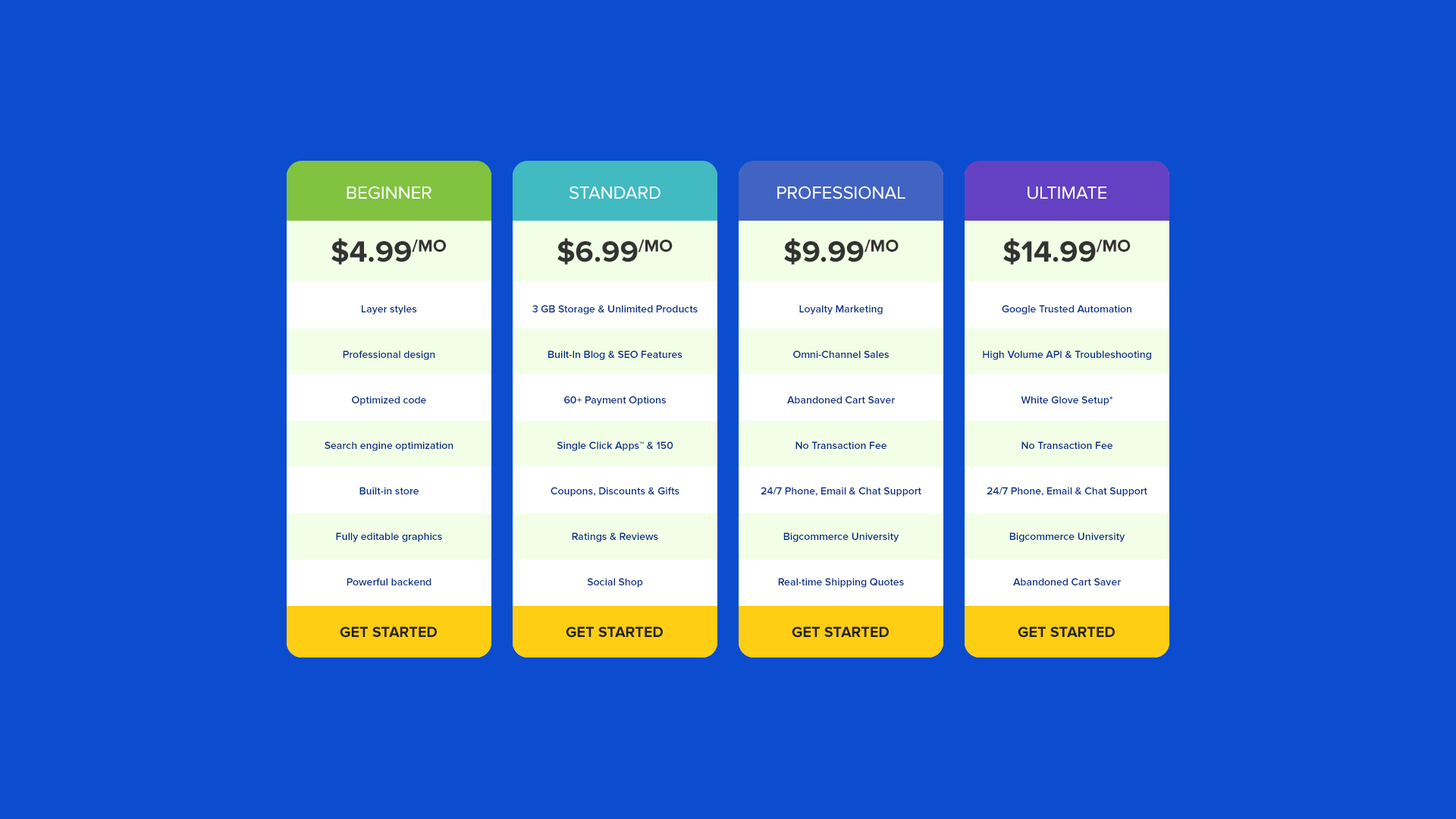
<style>
.page{position:relative;width:1456px;height:819px;background:#0c4cce}
.page>*{position:absolute;margin:0}
.t1{font:18.2px "ProximaNova-Regular";color:#ffffff;text-transform:uppercase}
.t2{font:30.3px "ProximaNova-Bold";color:#333333;text-transform:uppercase}
.t3{font:10.6px/45.5px "ProximaNova-Semibold";color:#032f87}
.t4{font:15.2px "ProximaNova-Bold";color:#222222;text-transform:uppercase}
</style>
<div class="page">
<p class="t1" style="left:347px;top:186px;width:84px;height:13px">Beginner</p>
<p class="t1" style="left:570px;top:186px;width:90px;height:13px">Standard</p>
<p class="t1" style="left:777px;top:186px;width:128px;height:13px">professional</p>
<p class="t1" style="left:1028px;top:187px;width:78px;height:12px">ultimate</p>
<p class="t2" style="left:331px;top:238px;width:115px;height:27px">$4.99/mo</p>
<p class="t2" style="left:557px;top:238px;width:116px;height:27px">$6.99/mo</p>
<p class="t2" style="left:784px;top:238px;width:115px;height:27px">$9.99/mo</p>
<p class="t2" style="left:1003px;top:238px;width:128px;height:27px">$14.99/mo</p>
<p class="t3" style="left:325px;top:305px;width:128px;height:280px;text-align:center">Layer styles<br>Professional design<br>Optimized code<br>Search engine optimization<br>Built-in store<br>Fully editable graphics<br>Powerful backend</p>
<p class="t3" style="left:532px;top:305px;width:166px;height:283px;text-align:center">3 GB Storage &amp; Unlimited Products<br>Built-In Blog &amp; SEO Features<br>60+ Payment Options<br>Single Click Apps™ &amp; 150<br>Coupons, Discounts &amp; Gifts<br>Ratings &amp; Reviews<br>Social Shop</p>
<p class="t3" style="left:761px;top:305px;width:160px;height:283px;text-align:center">Loyalty Marketing<br>Omni-Channel Sales<br>Abandoned Cart Saver<br>No Transaction Fee<br>24/7 Phone, Email &amp; Chat Support<br>Bigcommerce University<br>Real-time Shipping Quotes</p>
<p class="t3" style="left:983px;top:305px;width:168px;height:280px;text-align:center">Google Trusted Automation<br>High Volume API &amp; Troubleshooting<br>White Glove Setup*<br>No Transaction Fee<br>24/7 Phone, Email &amp; Chat Support<br>Bigcommerce University<br>Abandoned Cart Saver</p>
<p class="t4" style="left:340px;top:626px;width:97px;height:12px">Get Started</p>
<p class="t4" style="left:566px;top:626px;width:97px;height:12px">Get Started</p>
<p class="t4" style="left:792px;top:626px;width:97px;height:12px">Get Started</p>
<p class="t4" style="left:1018px;top:626px;width:97px;height:12px">Get Started</p>
</div>
